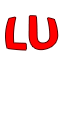
<style>
.page{position:relative;width:62px;height:124px;background:#ffffff}
.page>*{position:absolute;margin:0}
.t1{font:35.1px "MicrosoftYaHei-Bold";color:#ff0000}
</style>
<div class="page">
<p class="t1" style="left:6px;top:16px;width:52px;height:34px">LU</p>
</div>
